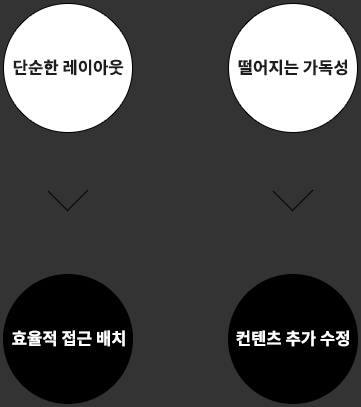
<style>
.page{position:relative;width:361px;height:407px;background:#333333}
.page>*{position:absolute;margin:0}
.t1{font:16.7px "NotoSansCJKkr-Bold";color:#1e1c1c}
.t2{font:16.7px "NotoSansCJKkr-Bold";color:#ffffff}
</style>
<div class="page">
<p class="t1" style="left:13px;top:59px;width:111px;height:17px">단순한 레이아웃</p>
<p class="t1" style="left:238px;top:59px;width:110px;height:17px">떨어지는 가독성</p>
<p class="t2" style="left:12px;top:330px;width:113px;height:17px">효율적 접근 배치</p>
<p class="t2" style="left:236px;top:330px;width:113px;height:17px">컨텐츠 추가 수정</p>
</div>
